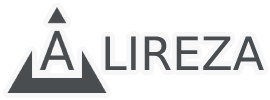
<style>
.page{position:relative;width:270px;height:100px;background:#ffffff}
.page>*{position:absolute;margin:0}
.t1{font:46px "DejaVuSans";color:#4a4d50}
</style>
<div class="page">
<p class="t1" style="left:105px;top:36px;width:159px;height:34px">LIREZA</p>
</div>
